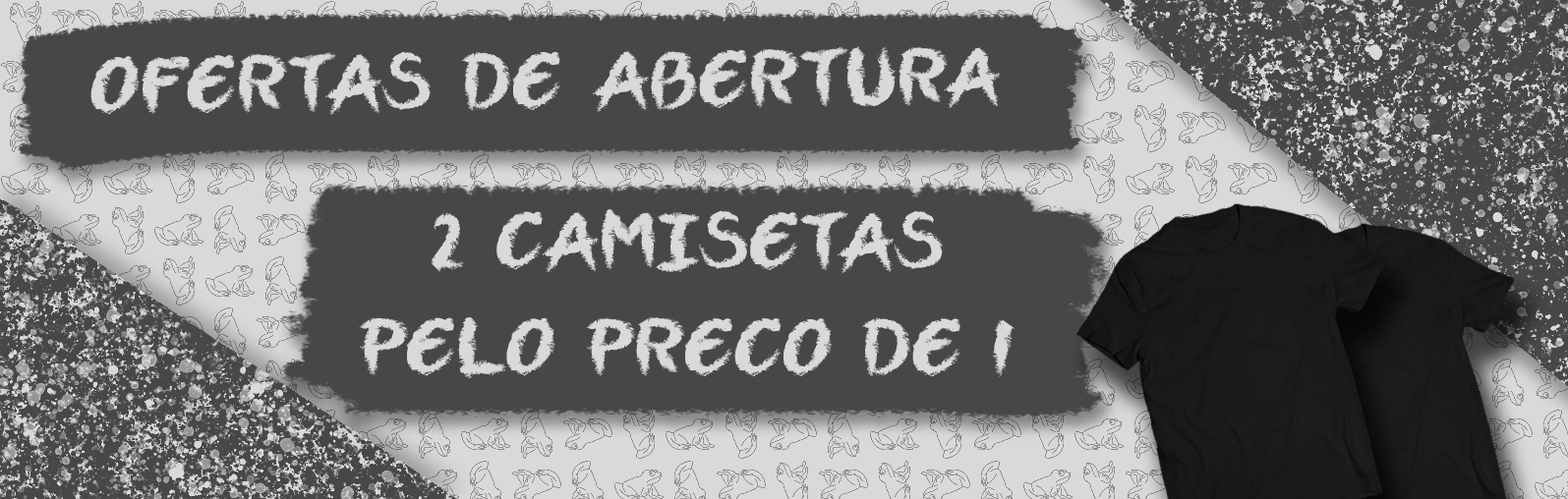
<style>
.page{position:relative;width:1568px;height:499px;background:#474747}
.page>*{position:absolute;margin:0}
.t1{font:88.5px "VTCAllSkratchedUpOne";letter-spacing:0.025em;color:#d9d9d9}
</style>
<div class="page">
<p class="t1" style="left:90px;top:46px;width:911px;height:69px;rotate:-1deg">OFERTAS DE ABERTURA</p>
<p class="t1" style="left:359px;top:208px;width:657px;height:171px;text-align:center">2 CAMISETAS PELO PRECO DE 1</p>
</div>
